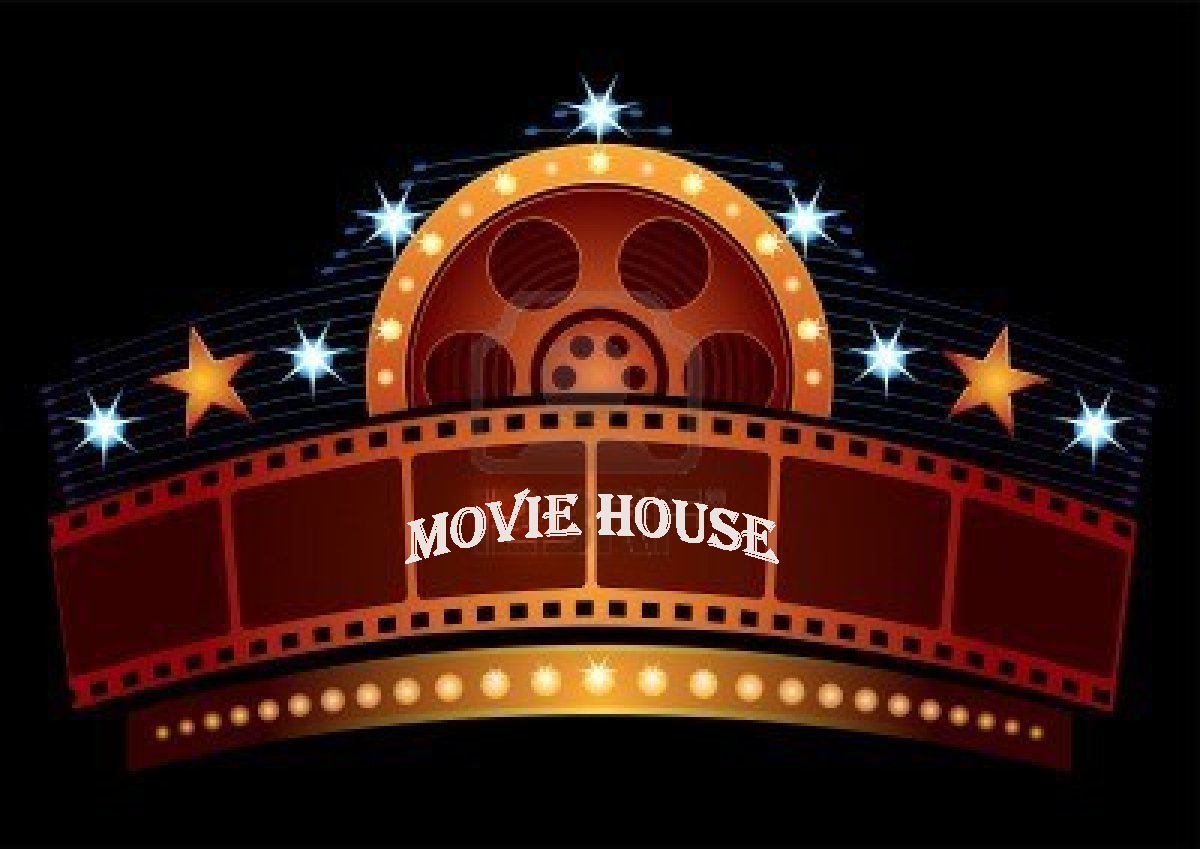
<style>
.page{position:relative;width:1200px;height:849px;background:#000000}
.page>*{position:absolute;margin:0}
.t1{font:60px "Algerian";color:#ece2df}
</style>
<div class="page">
<p class="t1" style="left:405px;top:488px;width:374px;height:76px">Movie House</p>
</div>
